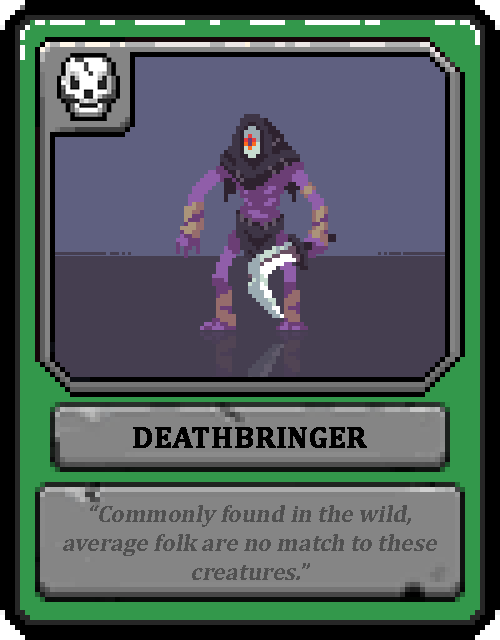
<style>
.page{position:relative;width:500px;height:640px}
.page>*{position:absolute;margin:0}
.t1{font:30px "Cambria-Bold";color:#000000;text-transform:uppercase;font-weight:bold}
.t2{font:24px "Cambria-Bold";color:#505050;font-style:italic}
</style>
<div class="page">
<p class="t1" style="left:133px;top:427px;width:234px;height:21px">DeathBringer</p>
<p class="t2" style="left:63px;top:505px;width:374px;height:75px;text-align:center">“Commonly found in the wild, average folk are no match to these creatures.”</p>
</div>
